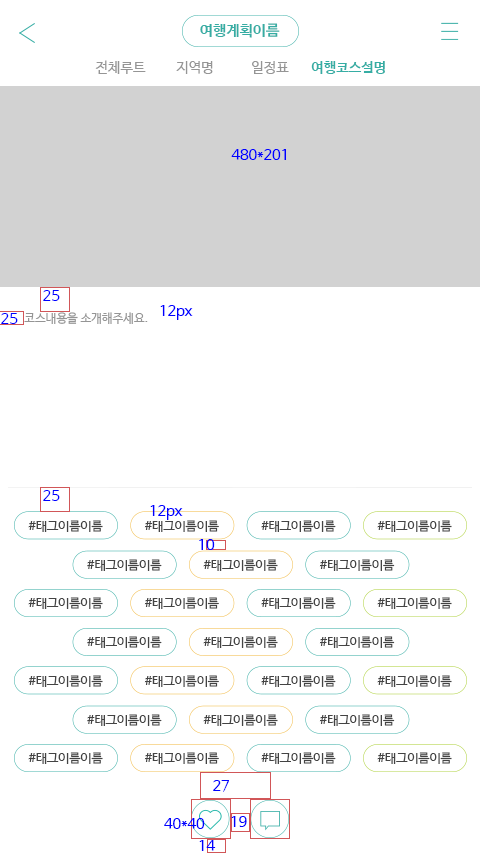
<style>
.page{position:relative;width:480px;height:853px;background:#ffffff}
.page>*{position:absolute;margin:0}
.t1{font:15px "NanumBarunGothicBold";color:#36ada4}
.t2{font:14px "NanumBarunGothic";color:#959595}
.t3{font:14px "NanumBarunGothicBold";color:#36ada4}
.t4{font:14.6px "NanumBarunGothic";color:#0000ff}
.t5{font:15px "NanumBarunGothic";color:#0000ff}
.t6{font:12px "NanumBarunGothic";color:#959595}
.t7{font:12.5px "NanumBarunGothic";color:#434343}
</style>
<div class="page">
<p class="t1" style="left:200px;top:23px;width:80px;height:15px">여행계획이름</p>
<p class="t2" style="left:95px;top:60px;width:51px;height:14px">전체루트</p>
<p class="t2" style="left:176px;top:61px;width:37px;height:13px">지역명</p>
<p class="t2" style="left:252px;top:61px;width:37px;height:13px">일정표</p>
<p class="t3" style="left:311px;top:61px;width:74px;height:13px">여행코스설명</p>
<p class="t4" style="left:231px;top:149px;width:55px;height:11px">480*201</p>
<p class="t5" style="left:43px;top:290px;width:17px;height:11px">25</p>
<p class="t4" style="left:160px;top:305px;width:33px;height:15px">12px</p>
<p class="t5" style="left:1px;top:313px;width:17px;height:11px">25</p>
<p class="t6" style="left:24px;top:312px;width:124px;height:12px">코스내용을 소개해주세요.</p>
<p class="t5" style="left:43px;top:490px;width:17px;height:11px">25</p>
<p class="t4" style="left:150px;top:505px;width:33px;height:15px">12px</p>
<p class="t7" style="left:28px;top:520px;width:75px;height:12px">#태그이름이름</p>
<p class="t7" style="left:144px;top:520px;width:75px;height:12px">#태그이름이름</p>
<p class="t7" style="left:261px;top:520px;width:75px;height:12px">#태그이름이름</p>
<p class="t7" style="left:377px;top:520px;width:75px;height:12px">#태그이름이름</p>
<p class="t4" style="left:199px;top:539px;width:16px;height:11px">10</p>
<p class="t7" style="left:87px;top:559px;width:75px;height:12px">#태그이름이름</p>
<p class="t7" style="left:203px;top:559px;width:75px;height:12px">#태그이름이름</p>
<p class="t7" style="left:319px;top:559px;width:76px;height:12px">#태그이름이름</p>
<p class="t7" style="left:28px;top:597px;width:75px;height:12px">#태그이름이름</p>
<p class="t7" style="left:144px;top:597px;width:75px;height:12px">#태그이름이름</p>
<p class="t7" style="left:261px;top:597px;width:75px;height:12px">#태그이름이름</p>
<p class="t7" style="left:377px;top:597px;width:75px;height:12px">#태그이름이름</p>
<p class="t7" style="left:87px;top:636px;width:75px;height:12px">#태그이름이름</p>
<p class="t7" style="left:203px;top:636px;width:75px;height:12px">#태그이름이름</p>
<p class="t7" style="left:319px;top:636px;width:76px;height:12px">#태그이름이름</p>
<p class="t7" style="left:28px;top:675px;width:75px;height:12px">#태그이름이름</p>
<p class="t7" style="left:144px;top:675px;width:75px;height:12px">#태그이름이름</p>
<p class="t7" style="left:261px;top:675px;width:75px;height:12px">#태그이름이름</p>
<p class="t7" style="left:377px;top:675px;width:75px;height:12px">#태그이름이름</p>
<p class="t7" style="left:87px;top:714px;width:75px;height:12px">#태그이름이름</p>
<p class="t7" style="left:203px;top:714px;width:75px;height:12px">#태그이름이름</p>
<p class="t7" style="left:319px;top:714px;width:76px;height:12px">#태그이름이름</p>
<p class="t7" style="left:28px;top:752px;width:75px;height:12px">#태그이름이름</p>
<p class="t7" style="left:144px;top:752px;width:75px;height:12px">#태그이름이름</p>
<p class="t7" style="left:261px;top:752px;width:75px;height:12px">#태그이름이름</p>
<p class="t7" style="left:377px;top:752px;width:75px;height:12px">#태그이름이름</p>
<p class="t4" style="left:213px;top:780px;width:16px;height:12px">27</p>
<p class="t4" style="left:164px;top:818px;width:41px;height:11px">40*40</p>
<p class="t4" style="left:231px;top:816px;width:16px;height:11px">19</p>
<p class="t4" style="left:199px;top:840px;width:17px;height:11px">14</p>
</div>
